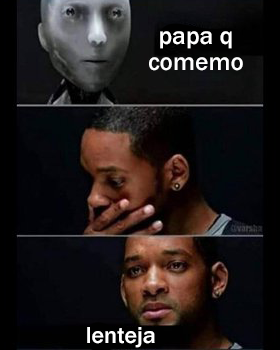
<style>
.page{position:relative;width:280px;height:350px}
.page>*{position:absolute;margin:0}
.t1{font:25.3px "FranklinGothic-Medium";color:#ffffff}
.t2{font:23.9px "FranklinGothic-Medium";color:#ffffff}
</style>
<div class="page">
<p class="t1" style="left:149px;top:31px;width:94px;height:40px;text-align:center">papa q<br>comemo</p>
<p class="t2" style="left:87px;top:327px;width:68px;height:21px">lenteja</p>
</div>
